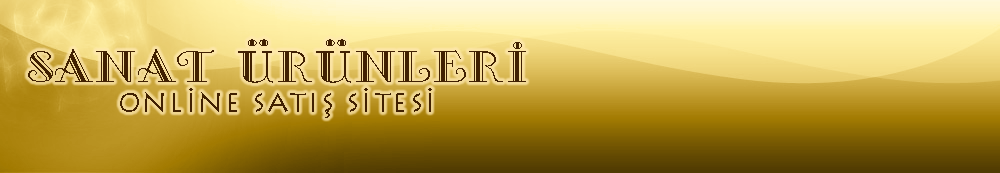
<style>
.page{position:relative;width:1000px;height:173px}
.page>*{position:absolute;margin:0}
.t1{font:26.6px/30px "LithosPro-Regular";letter-spacing:0.06em;color:#412102}
.t2{font:37.7px/30px "GalleriaPlain";letter-spacing:0.06em;color:#412102}
</style>
<div class="page">
<p class="t1" style="left:28px;top:39px;width:498px;height:79px;text-align:center"><span class="t2">SANAT ÜRÜNLERİ<br></span>ONLİNE SATIŞ SİTESİ</p>
</div>
